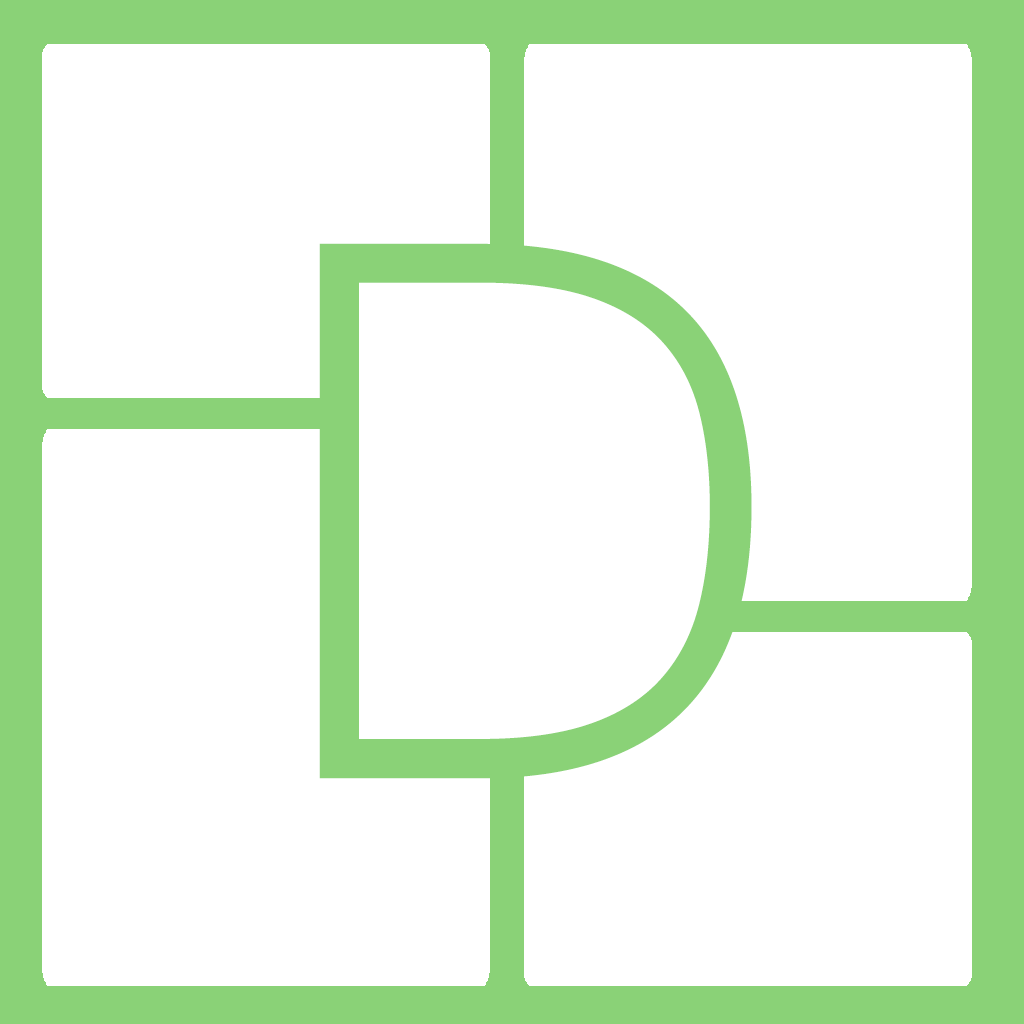
<style>
.page{position:relative;width:1024px;height:1024px;background:#ffffff}
.page>*{position:absolute;margin:0}
.t1{font:1000px "Microsoft-Yi-Baiti";color:#8ad277}
</style>
<div class="page">
<p class="t1" style="left:319px;top:243px;width:433px;height:536px">D</p>
</div>
